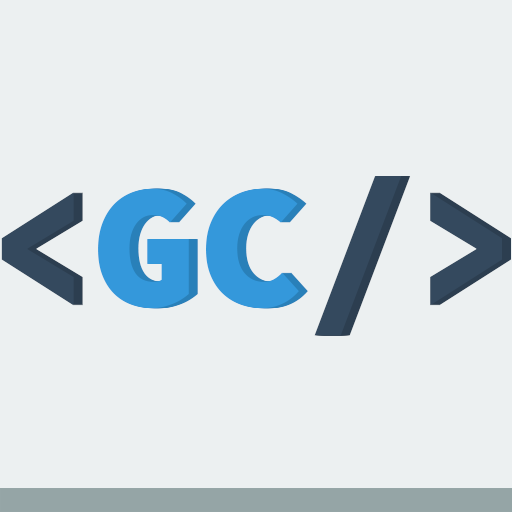
<style>
.page{position:relative;width:512px;height:512px;background:#ecf0f1}
.page>*{position:absolute;margin:0}
.t1{font:177px "SourceCodePro-Black";color:#3498db}
.t2{font:183px "SourceCodePro-Black";color:#34495e}
.t3{font:177px "SourceCodePro-Black"}
.t4{font:183px "SourceCodePro-Black"}
</style>
<div class="page">
<p class="t1" style="left:1px;top:176px;width:501px;height:160px"><span class="t2">&lt;</span>GC<span class="t2">/&gt;</span></p>
<p class="t3" style="left:2px;top:176px;width:501px;height:160px"><span class="t4">&lt;</span>GC<span class="t4">/&gt;</span></p>
<p class="t3" style="left:3px;top:176px;width:501px;height:160px"><span class="t4">&lt;</span>GC<span class="t4">/&gt;</span></p>
<p class="t3" style="left:4px;top:176px;width:501px;height:160px"><span class="t4">&lt;</span>GC<span class="t4">/&gt;</span></p>
<p class="t3" style="left:5px;top:176px;width:501px;height:160px"><span class="t4">&lt;</span>GC<span class="t4">/&gt;</span></p>
<p class="t3" style="left:6px;top:176px;width:501px;height:160px"><span class="t4">&lt;</span>GC<span class="t4">/&gt;</span></p>
<p class="t3" style="left:7px;top:176px;width:501px;height:160px"><span class="t4">&lt;</span>GC<span class="t4">/&gt;</span></p>
<p class="t3" style="left:8px;top:176px;width:501px;height:160px"><span class="t4">&lt;</span>GC<span class="t4">/&gt;</span></p>
<p class="t3" style="left:9px;top:176px;width:501px;height:160px"><span class="t4">&lt;</span>GC<span class="t4">/&gt;</span></p>
<p class="t3" style="left:10px;top:176px;width:501px;height:160px"><span class="t4">&lt;</span>GC<span class="t4">/&gt;</span></p>
</div>
